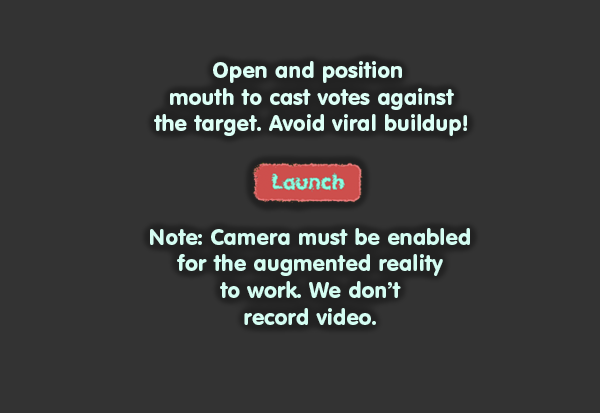
<style>
.page{position:relative;width:600px;height:413px;background:#333333}
.page>*{position:absolute;margin:0}
.t1{font:22.2px "VAGRoundedBT-Regular";color:#dcfff6}
.t2{font:22.2px "VAGRoundedBT-Regular";color:#d4fdf2}
</style>
<div class="page">
<p class="t1" style="left:154px;top:61px;width:313px;height:75px;text-align:center">Open and position <br>mouth to cast votes against<br>the target. Avoid viral buildup!</p>
<p class="t2" style="left:150px;top:228px;width:320px;height:97px;text-align:center">Note: Camera must be enabled<br>for the augmented reality<br>to work. We don’t<br>record video.</p>
</div>
